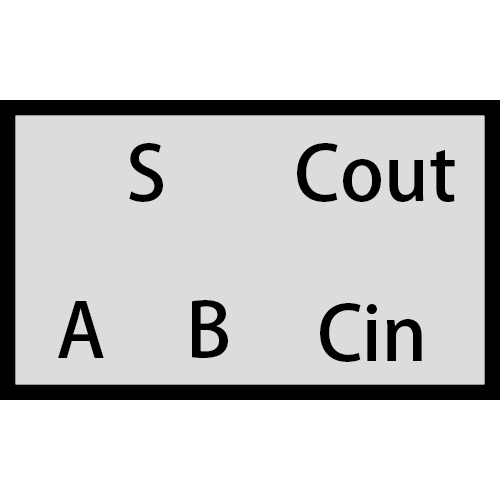
<style>
.page{position:relative;width:500px;height:500px;background:#dcdcdc}
.page>*{position:absolute;margin:0}
.t1{font:75px "AdobeHeitiStd-Regular";color:#000000}
</style>
<div class="page">
<p class="t1" style="left:129px;top:143px;width:34px;height:59px">S</p>
<p class="t1" style="left:297px;top:143px;width:158px;height:59px">Cout</p>
<p class="t1" style="left:58px;top:301px;width:46px;height:57px">A</p>
<p class="t1" style="left:192px;top:300px;width:36px;height:58px">B</p>
<p class="t1" style="left:320px;top:303px;width:102px;height:59px">Cin</p>
</div>
